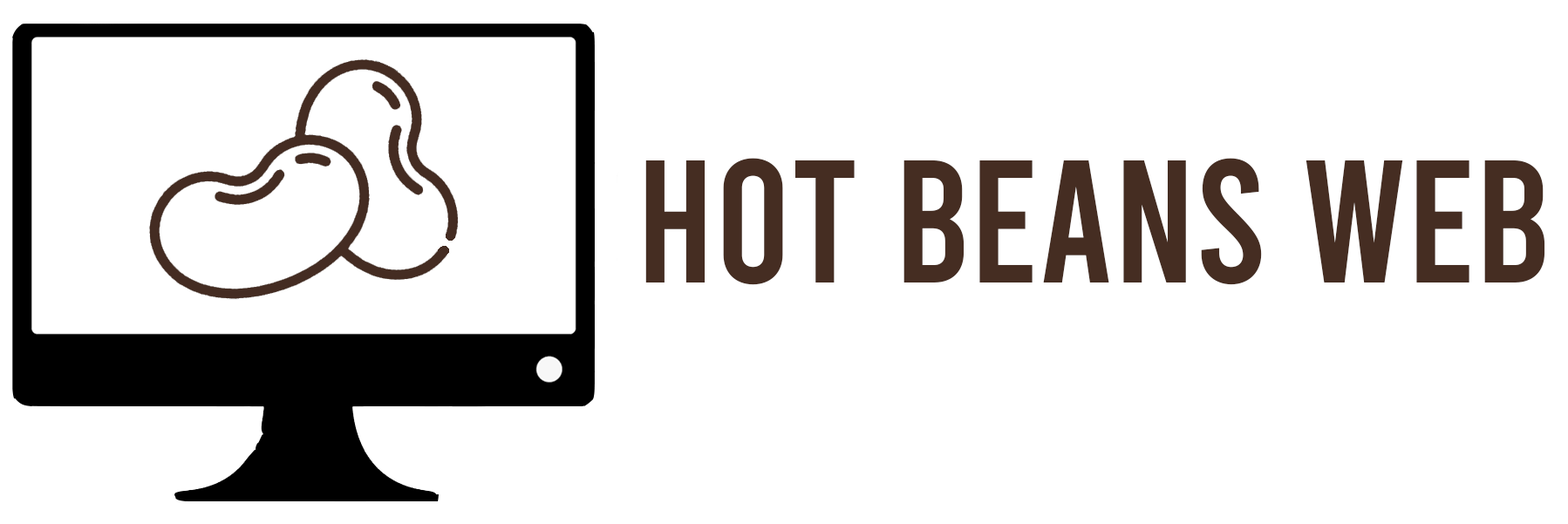
<style>
.page{position:relative;width:1568px;height:524px;background:#ffffff}
.page>*{position:absolute;margin:0}
.t1{font:174.4px "Bebas-Regular";color:#452d22}
</style>
<div class="page">
<p class="t1" style="left:645px;top:158px;width:900px;height:127px">HOT BEANS WEB</p>
</div>
